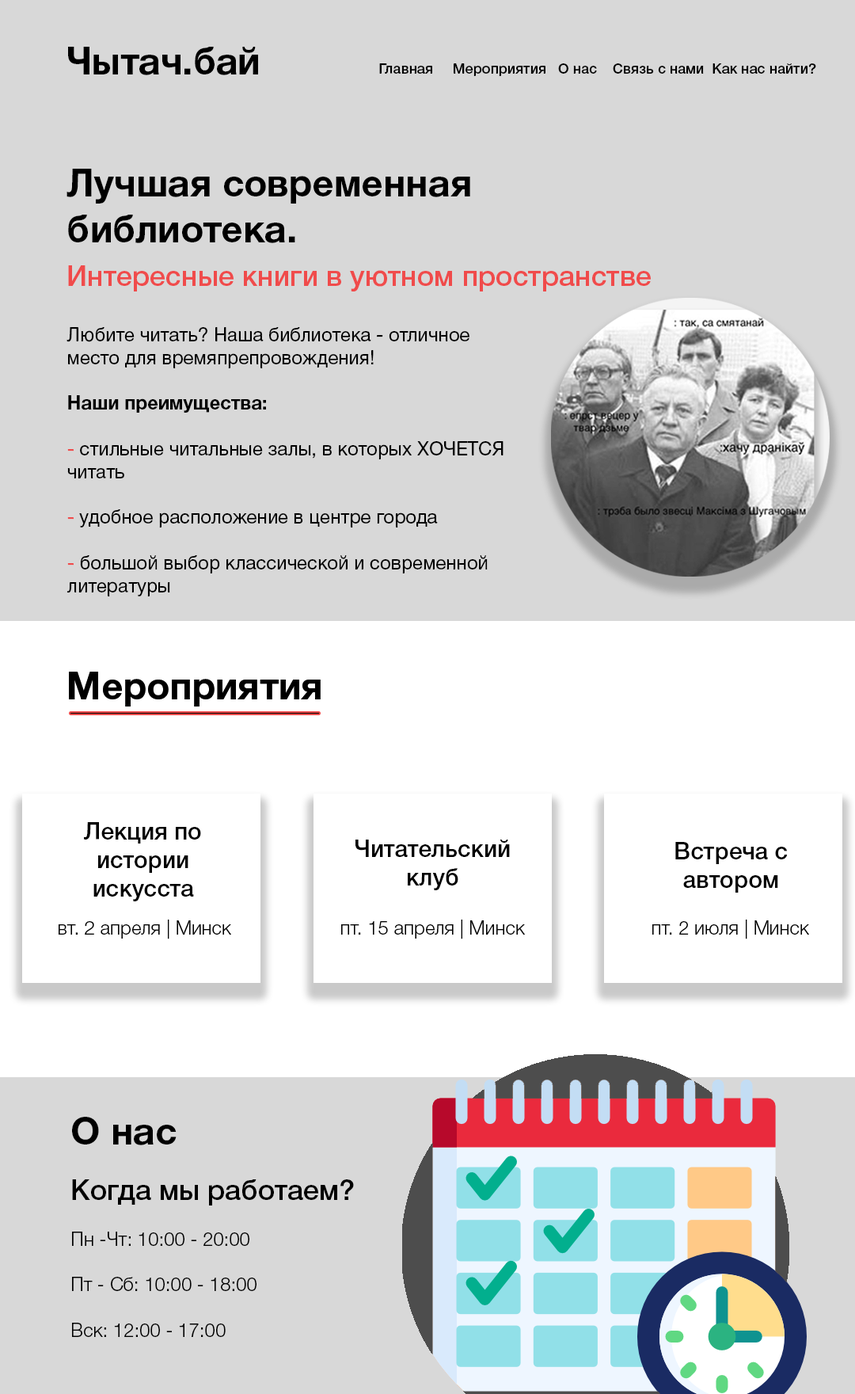
<style>
.page{position:relative;width:855px;height:1394px;background:#d8d8d8}
.page>*{position:absolute;margin:0}
.t1{font:38px "HelveticaNeueCyr-Bold";color:#000000}
.t2{font:14.3px "HelveticaNeueCyr-Medium";color:#000000}
.t3{font:28.5px "HelveticaNeueCyr-Medium";color:#f04b4b}
.t4{font:19px "HelveticaNeueCyr-Roman";color:#000000}
.t5{font:19px "HelveticaNeueCyr-Bold";color:#000000}
.t6{font:19px "HelveticaNeueCyr-Roman";color:#f04b4b}
.t7{font:23.8px "HelveticaNeueCyr-Medium";color:#000000}
.t8{font:19px "HelveticaNeueCyr-Light";color:#000000}
.t9{font:28.5px "HelveticaNeueCyr-Medium";color:#000000}
</style>
<div class="page">
<p class="t1" style="left:68px;top:47px;width:190px;height:28px">Чытач.бай</p>
<p class="t2" style="left:379px;top:63px;width:438px;height:13px">Главная     Мероприятия   О нас    Связь с нами  Как нас найти?</p>
<p class="t1" style="left:67px;top:169px;width:403px;height:74px">Лучшая современная библиотека.</p>
<p class="t3" style="left:68px;top:265px;width:583px;height:26px">Интересные книги в уютном пространстве</p>
<p class="t4" style="left:67px;top:327px;width:437px;height:269px">Любите читать? Наша библиотека - отличное место для времяпрепровождения!<br><br><span class="t5">Наши преимущества:<br></span><br><span class="t6">-</span> стильные читальные залы, в которых ХОЧЕТСЯ читать<br><br><span class="t6">-</span> удобное расположение в центре города<br><br><span class="t6">-</span> большой выбор классической и современной литературы</p>
<p class="t1" style="left:69px;top:672px;width:252px;height:35px">Мероприятия</p>
<p class="t1" style="left:69px;top:672px;width:252px;height:35px">Мероприятия</p>
<p class="t7" style="left:84px;top:822px;width:117px;height:79px;text-align:center">Лекция по истории искусста</p>
<p class="t7" style="left:356px;top:840px;width:154px;height:50px;text-align:center">Читательский клуб</p>
<p class="t7" style="left:676px;top:842px;width:112px;height:51px;text-align:center">Встреча с автором</p>
<p class="t8" style="left:59px;top:920px;width:172px;height:19px">вт. 2 апреля | Минск</p>
<p class="t8" style="left:341px;top:920px;width:184px;height:19px">пт. 15 апреля | Минск</p>
<p class="t8" style="left:653px;top:920px;width:156px;height:19px">пт. 2 июля | Минск</p>
<p class="t1" style="left:72px;top:1117px;width:105px;height:28px">О нас</p>
<p class="t9" style="left:72px;top:1179px;width:282px;height:26px">Когда мы работаем?</p>
<p class="t8" style="left:72px;top:1232px;width:185px;height:105px">Пн -Чт: 10:00 - 20:00<br><br>Пт - Сб: 10:00 - 18:00<br><br>Вск: 12:00 - 17:00</p>
</div>
